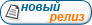
<style>
.page{position:relative;width:92px;height:25px;background:#fbfbfb}
.page>*{position:absolute;margin:0}
.t1{font:12px "Arial-BoldItalicMT";color:#006990}
.t2{font:9px "Arial-BoldMT";color:#108cb4}
.t3{font:12px "Arial-BoldItalicMT";color:#fd7700}
</style>
<div class="page">
<p class="t1" style="left:21px;top:1px;width:40px;height:10px"><span class="t2"> </span>новый</p>
<p class="t3" style="left:49px;top:14px;width:36px;height:9px">релиз</p>
</div>
